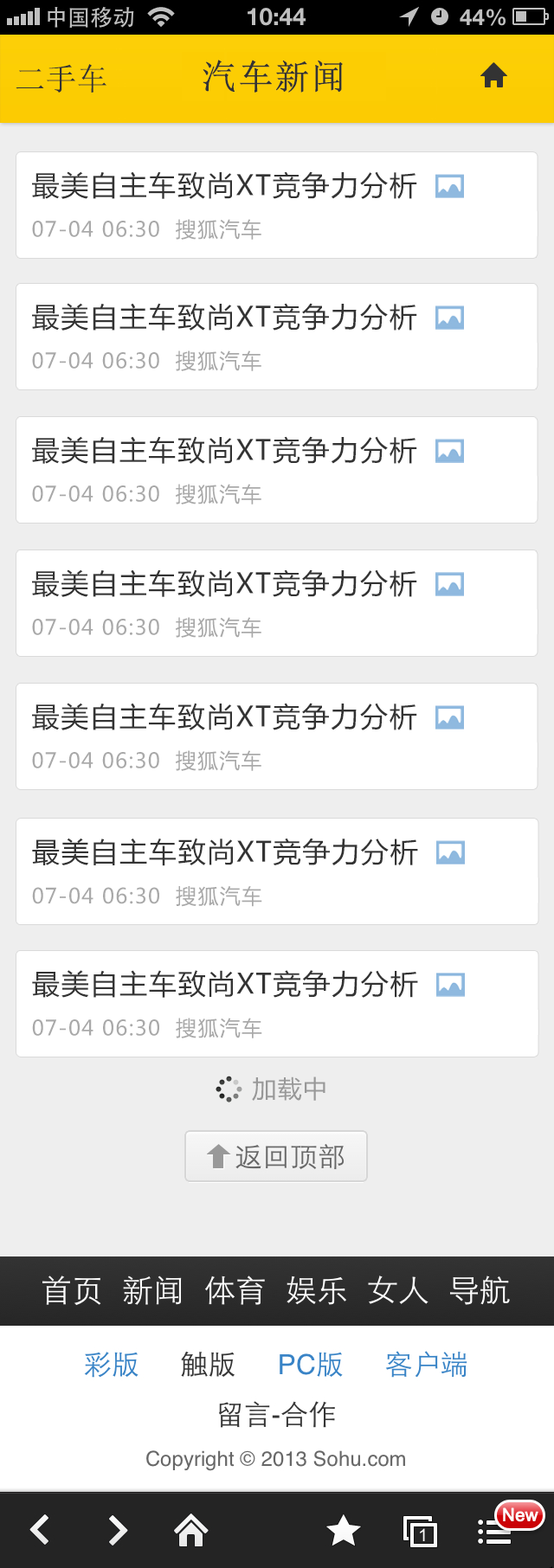
<style>
.page{position:relative;width:554px;height:1568px;background:#ffffff}
.page>*{position:absolute;margin:0}
.t1{font:31.2px "SimSun";color:#333333}
.t2{font:34.6px "SimSun";letter-spacing:0.025em;color:#333333;font-weight:bold}
.t3{font:20.8px/41.5px "MicrosoftYaHei";letter-spacing:0.05em;color:#a9a9a9}
.t4{font:27.7px "MicrosoftYaHei";letter-spacing:0.05em;color:#333333}
.t5{font:20.8px/41.7px "MicrosoftYaHei";letter-spacing:0.05em;color:#a9a9a9}
.t6{font:27.8px "MicrosoftYaHei";letter-spacing:0.05em;color:#333333}
.t7{font:24.2px "MicrosoftYaHei";letter-spacing:0.05em;color:#989898}
</style>
<div class="page">
<p class="t1" style="left:16px;top:64px;width:90px;height:29px">二手车</p>
<p class="t2" style="left:202px;top:60px;width:141px;height:33px">汽车新闻</p>
<p class="t3" style="left:32px;top:171px;width:385px;height:69px"><span class="t4">最美自主车致尚XT竞争力分析<br></span>07-04 06:30  搜狐汽车</p>
<p class="t3" style="left:32px;top:303px;width:385px;height:68px"><span class="t4">最美自主车致尚XT竞争力分析<br></span>07-04 06:30  搜狐汽车</p>
<p class="t3" style="left:32px;top:436px;width:385px;height:68px"><span class="t4">最美自主车致尚XT竞争力分析<br></span>07-04 06:30  搜狐汽车</p>
<p class="t3" style="left:32px;top:569px;width:385px;height:69px"><span class="t4">最美自主车致尚XT竞争力分析<br></span>07-04 06:30  搜狐汽车</p>
<p class="t3" style="left:32px;top:703px;width:385px;height:68px"><span class="t4">最美自主车致尚XT竞争力分析<br></span>07-04 06:30  搜狐汽车</p>
<p class="t5" style="left:32px;top:838px;width:386px;height:69px"><span class="t6">最美自主车致尚XT竞争力分析<br></span>07-04 06:30  搜狐汽车</p>
<p class="t5" style="left:32px;top:970px;width:386px;height:68px"><span class="t6">最美自主车致尚XT竞争力分析<br></span>07-04 06:30  搜狐汽车</p>
<p class="t7" style="left:252px;top:1076px;width:73px;height:25px">加载中</p>
</div>
